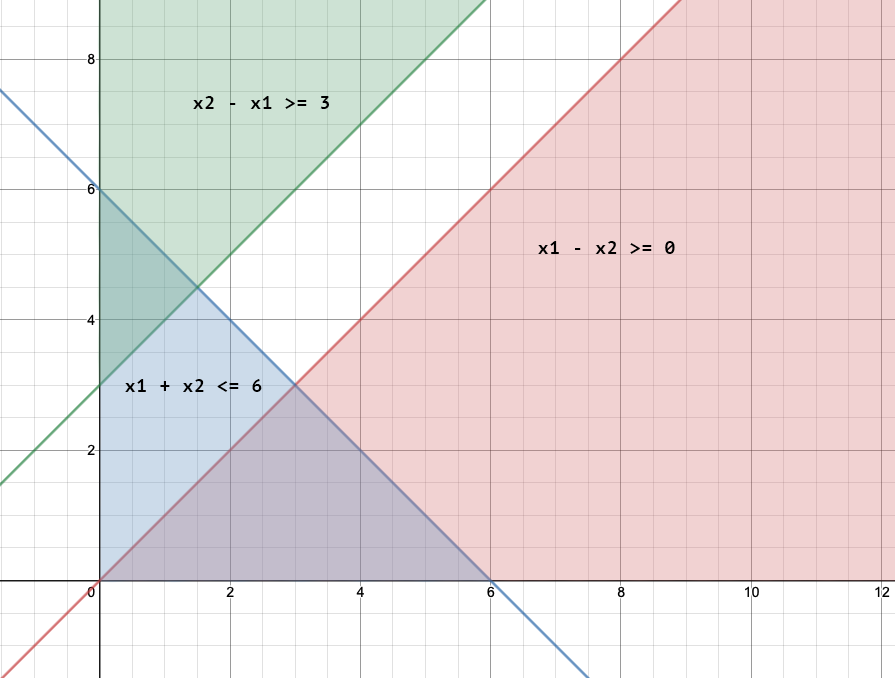
<style>
.page{position:relative;width:895px;height:678px;background:#f1d2d2}
.page>*{position:absolute;margin:0}
.t1{font:18px "PTMono-Bold";letter-spacing:0.04em;color:#000000}
</style>
<div class="page">
<p class="t1" style="left:193px;top:96px;width:136px;height:13px">x2 - x1 &gt;= 3</p>
<p class="t1" style="left:538px;top:241px;width:137px;height:13px">x1 - x2 &gt;= 0</p>
<p class="t1" style="left:125px;top:379px;width:137px;height:13px">x1 + x2 &lt;= 6</p>
</div>
